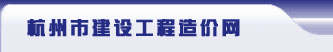
<style>
.page{position:relative;width:333px;height:52px;background:#eaeaf2}
.page>*{position:absolute;margin:0}
.t1{font:18px "ÎÄ¶¦ÐÂÒÕÌå¼ò-Regular";letter-spacing:0.2em;color:#242c84;font-weight:bold}
</style>
<div class="page">
<p class="t1" style="left:27px;top:19px;width:213px;height:18px">杭州市建设工程造价网</p>
</div>
